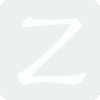
<style>
.page{position:relative;width:100px;height:100px;background:#ecf0f1}
.page>*{position:absolute;margin:0}
.t1{font:120px "FZSTK--GBK1-0";color:#fbfdfe}
</style>
<div class="page">
<p class="t1" style="left:17px;top:16px;width:70px;height:69px">Z</p>
</div>
